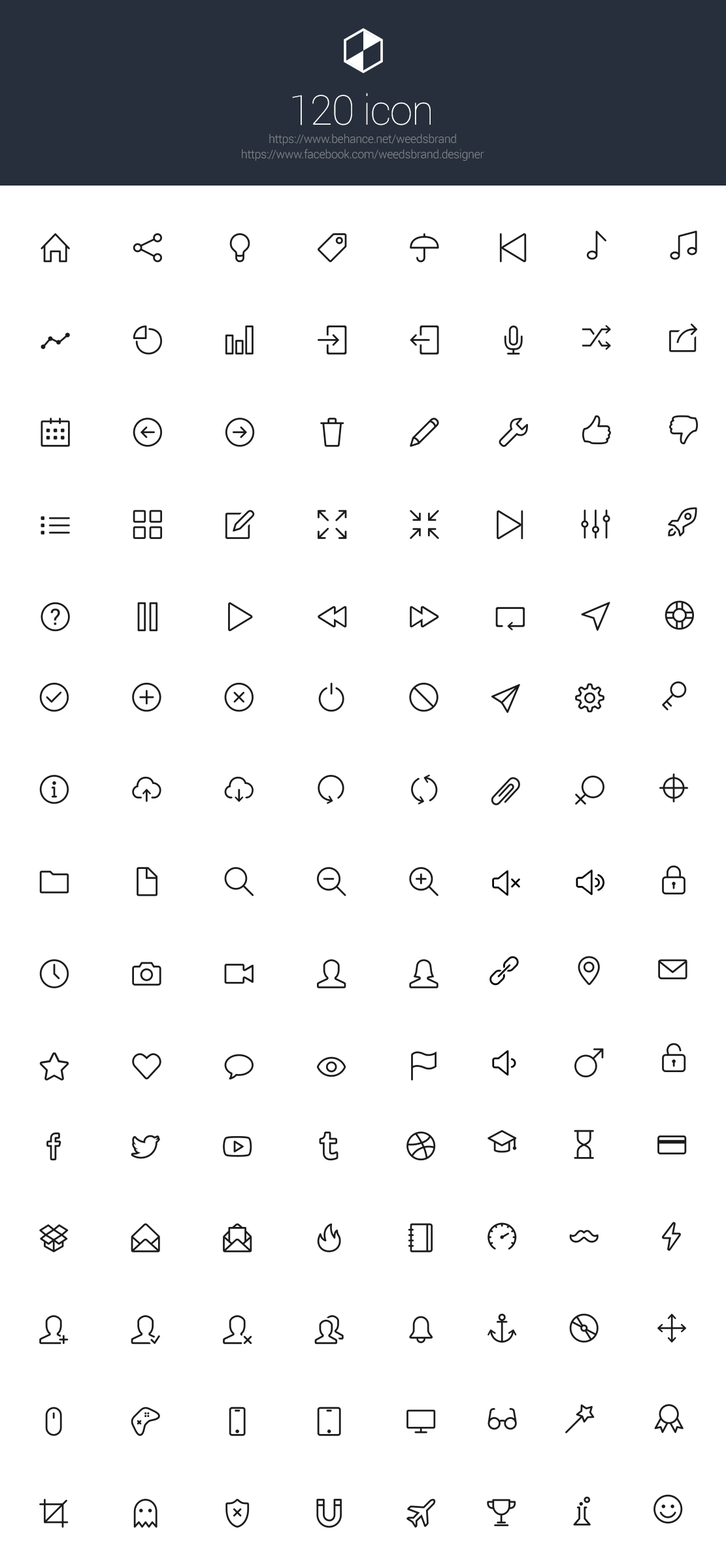
<style>
.page{position:relative;width:726px;height:1568px;background:#ffffff}
.page>*{position:absolute;margin:0}
.t1{font:41.1px "Roboto-Thin";letter-spacing:-0.025em;color:#ffffff}
.t2{font:11.8px "Roboto-Light";letter-spacing:-0.025em;color:#85888d}
</style>
<div class="page">
<p class="t1" style="left:292px;top:93px;width:139px;height:32px">120 icon</p>
<p class="t2" style="left:269px;top:134px;width:187px;height:12px">https://www.behance.net/weedsbrand</p>
<p class="t2" style="left:242px;top:149px;width:242px;height:12px">https://www.facebook.com/weedsbrand.designer</p>
</div>
